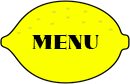
<style>
.page{position:relative;width:130px;height:84px;background:#fbff00}
.page>*{position:absolute;margin:0}
.t1{font:20px "Vogue";color:#000000}
</style>
<div class="page">
<p class="t1" style="left:32px;top:34px;width:67px;height:16px">MENU</p>
</div>
